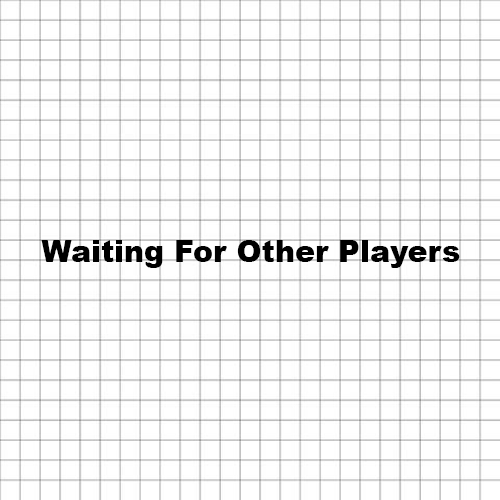
<style>
.page{position:relative;width:500px;height:500px;background:#ffffff}
.page>*{position:absolute;margin:0}
.t1{font:30px "Arial-Black";color:#000000}
</style>
<div class="page">
<p class="t1" style="left:41px;top:240px;width:419px;height:28px">Waiting For Other Players</p>
</div>
